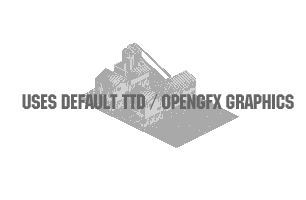
<style>
.page{position:relative;width:306px;height:200px;background:#ffffff}
.page>*{position:absolute;margin:0}
.t1{font:22px "MachineITCTT";letter-spacing:-0.01em;color:#666666}
</style>
<div class="page">
<p class="t1" style="left:22px;top:93px;width:272px;height:17px">USES DEFAULT TTD / OpenGFX Graphics</p>
</div>
